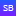
<style>
.page{position:relative;width:16px;height:16px}
.page>*{position:absolute;margin:0}
.t1{font:9px "Ubuntu-Light";color:#ffffff}
</style>
<div class="page">
<p class="t1" style="left:3px;top:5px;width:11px;height:6px">SB</p>
</div>
